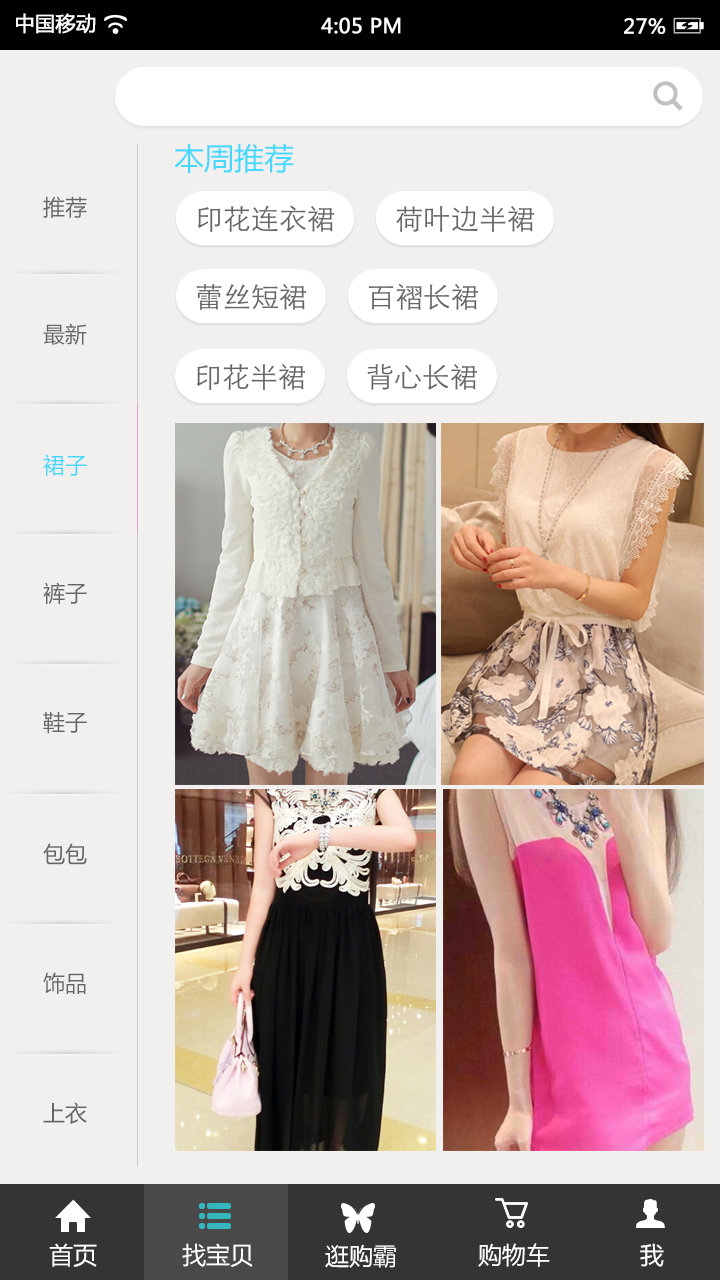
<style>
.page{position:relative;width:720px;height:1280px;background:#f2efef}
.page>*{position:absolute;margin:0}
.t1{font:20px "MicrosoftYaHei";color:#fffcfc;font-weight:bold}
.t2{font:20px "MicrosoftYaHei";color:#ffffff;font-weight:bold}
.t3{font:20px "MicrosoftYaHei";color:#fffefe;font-weight:bold}
.t4{font:30px "MicrosoftYaHei";color:#46d8fe}
.t5{font:22px "MicrosoftYaHei";color:#666666}
.t6{font:22px "MicrosoftYaHei";color:#46d8fe}
.t7{font:24px "MicrosoftYaHei";color:#ffffff}
</style>
<div class="page">
<p class="t1" style="left:16px;top:13px;width:80px;height:21px">中国移动</p>
<p class="t2" style="left:321px;top:17px;width:80px;height:17px">4:05 PM</p>
<p class="t3" style="left:624px;top:18px;width:42px;height:16px">27%</p>
<p class="t4" style="left:174px;top:144px;width:120px;height:30px">本周推荐</p>
<p class="t5" style="left:43px;top:196px;width:44px;height:22px">推荐</p>
<p class="t5" style="left:43px;top:323px;width:44px;height:22px">最新</p>
<p class="t6" style="left:43px;top:454px;width:44px;height:22px">裙子</p>
<p class="t5" style="left:43px;top:582px;width:44px;height:22px">裤子</p>
<p class="t5" style="left:43px;top:712px;width:44px;height:22px">鞋子</p>
<p class="t5" style="left:43px;top:843px;width:44px;height:22px">包包</p>
<p class="t5" style="left:43px;top:972px;width:43px;height:22px">饰品</p>
<p class="t5" style="left:43px;top:1102px;width:44px;height:22px">上衣</p>
<p class="t7" style="left:49px;top:1243px;width:48px;height:24px">首页</p>
<p class="t7" style="left:182px;top:1243px;width:71px;height:24px">找宝贝</p>
<p class="t7" style="left:325px;top:1244px;width:71px;height:24px">逛购霸</p>
<p class="t7" style="left:478px;top:1243px;width:72px;height:24px">购物车</p>
<p class="t7" style="left:640px;top:1243px;width:24px;height:24px">我</p>
</div>
